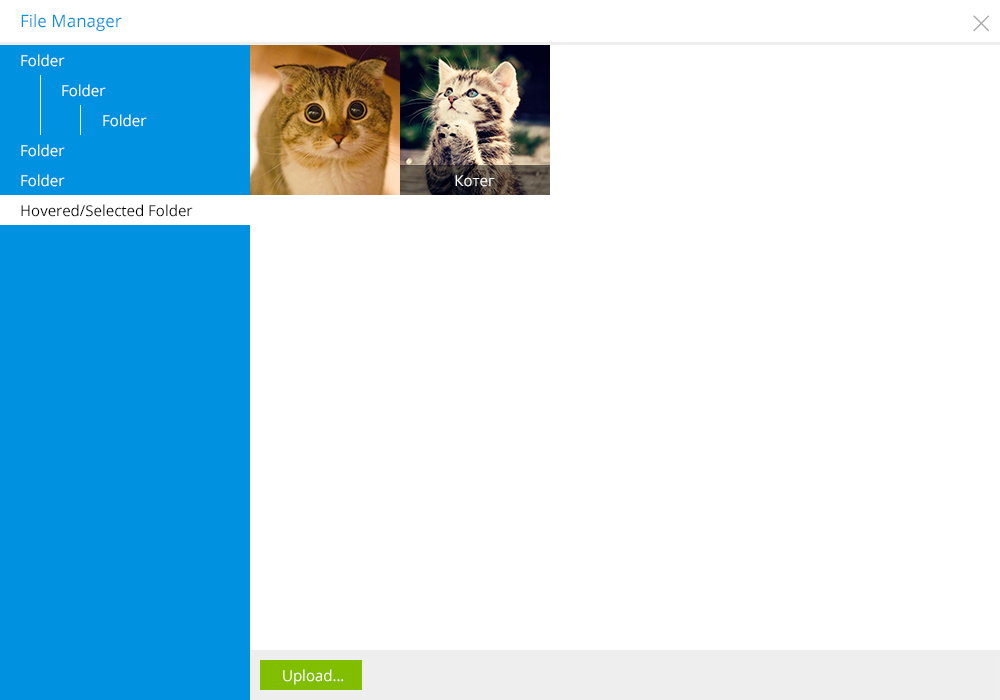
<style>
.page{position:relative;width:1000px;height:700px;background:#ffffff}
.page>*{position:absolute;margin:0}
.t1{font:17px "OpenSans";color:#0091e1}
.t2{font:36px "OpenSans-Light";color:#aaaaaa}
.t3{font:15px "OpenSans";color:#ffffff}
.t4{font:15px "OpenSans";color:#000000}
</style>
<div class="page">
<p class="t1" style="left:21px;top:14px;width:101px;height:17px">File Manager</p>
<p class="t2" style="left:973px;top:15px;width:17px;height:17px">×</p>
<p class="t3" style="left:21px;top:54px;width:44px;height:13px">Folder</p>
<p class="t3" style="left:62px;top:84px;width:44px;height:13px">Folder</p>
<p class="t3" style="left:103px;top:114px;width:44px;height:13px">Folder</p>
<p class="t3" style="left:21px;top:144px;width:44px;height:13px">Folder</p>
<p class="t3" style="left:21px;top:174px;width:44px;height:13px">Folder</p>
<p class="t3" style="left:455px;top:175px;width:40px;height:12px">Котег</p>
<p class="t4" style="left:21px;top:204px;width:172px;height:13px">Hovered/Selected Folder</p>
<p class="t3" style="left:283px;top:669px;width:61px;height:16px">Upload…</p>
</div>
